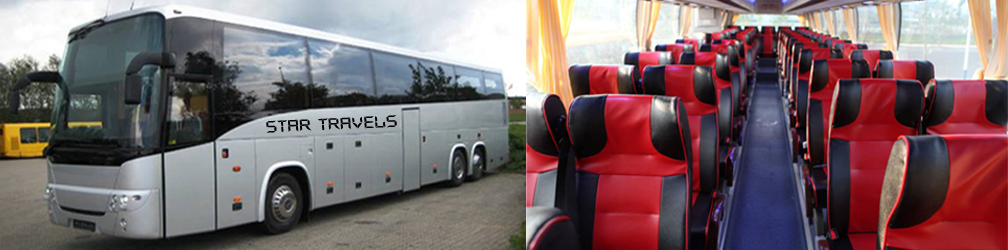
<style>
.page{position:relative;width:1008px;height:250px}
.page>*{position:absolute;margin:0}
.t1{font:16px "DigifaceWide";color:#000000}
</style>
<div class="page">
<p class="t1" style="left:266px;top:115px;width:131px;height:18px;rotate:-3deg">star travels</p>
</div>
